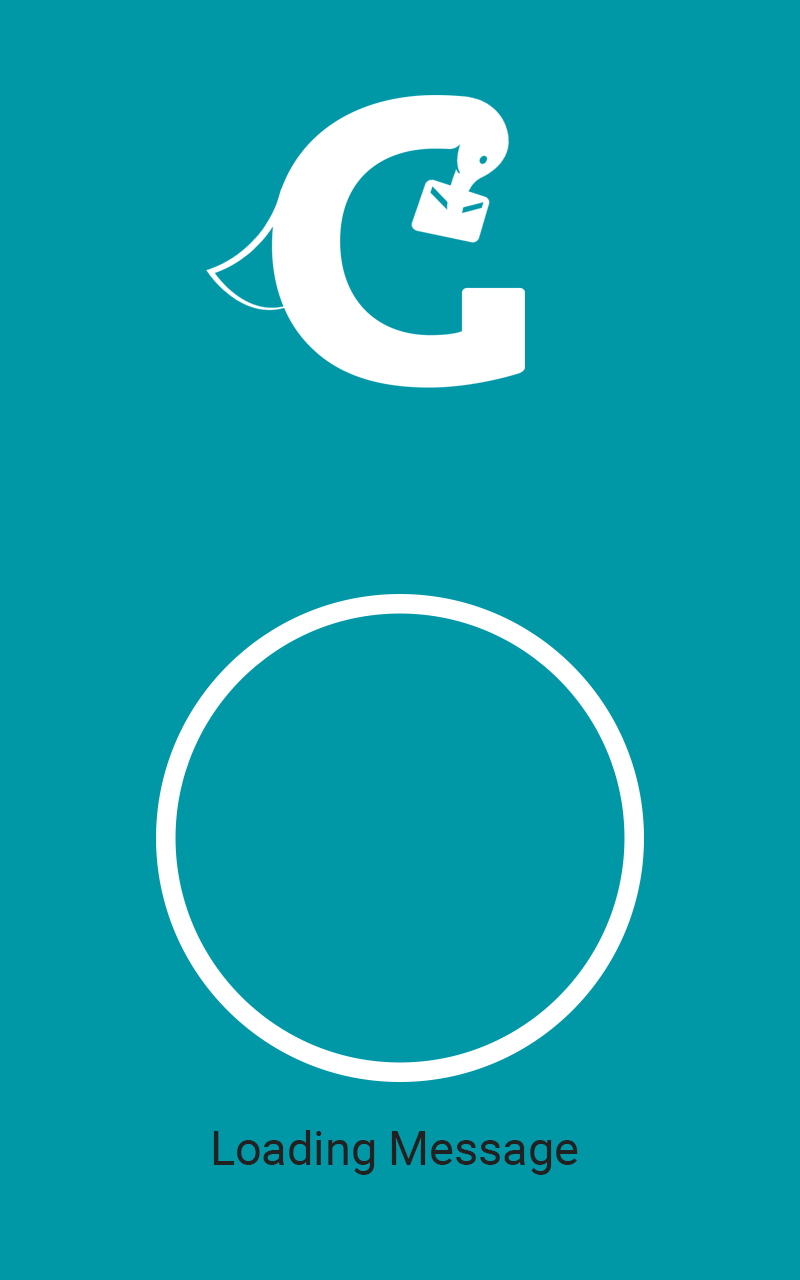
<style>
.page{position:relative;width:800px;height:1280px;background:#0097a7}
.page>*{position:absolute;margin:0}
.t1{font:46.8px "Roboto-Regular";color:#212121}
</style>
<div class="page">
<p class="t1" style="left:213px;top:1130px;width:365px;height:45px">Loading Message</p>
</div>
